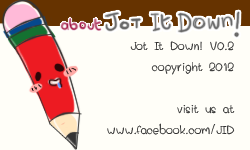
<style>
.page{position:relative;width:250px;height:150px;background:#fffef8}
.page>*{position:absolute;margin:0}
.t1{font:20px/21px "Pahnto";color:#333333}
</style>
<div class="page">
<p class="t1" style="left:107px;top:41px;width:128px;height:94px;text-align:right">Jot It Down! V0.2<br>copyright 2012<br><br>visit us at<br>www.facebook.com/JID</p>
</div>
